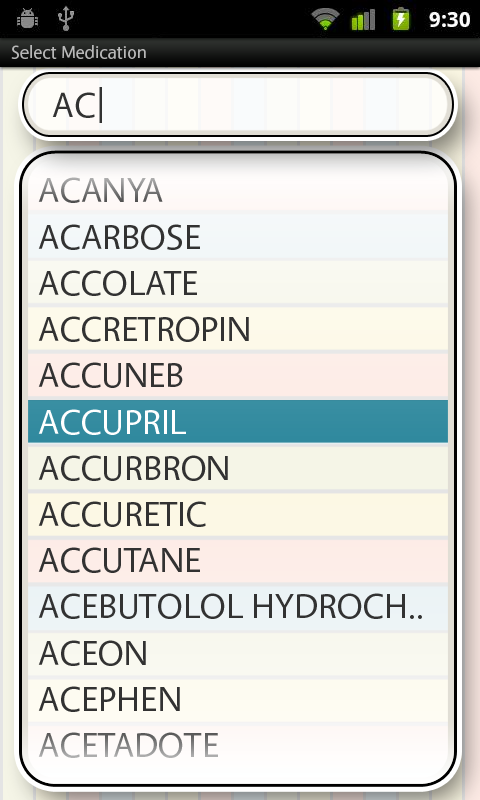
<style>
.page{position:relative;width:480px;height:800px}
.page>*{position:absolute;margin:0}
.t1{font:17.9px "Vegur-Regular";color:#b9b9b9}
.t2{font:35.9px "Vegur-Regular";color:#323232}
.t3{font:35.3px/46.2px "Vegur-Regular";color:#323232}
.t4{font:35.3px/46.2px "Vegur-Regular";color:#ffffff}
</style>
<div class="page">
<p class="t1" style="left:11px;top:45px;width:135px;height:14px">Select Medication</p>
<p class="t2" style="left:99px;top:87px;width:3px;height:36px">|</p>
<p class="t2" style="left:52px;top:92px;width:43px;height:26px">AC</p>
<p class="t3" style="left:38px;top:177px;width:384px;height:581px">ACANYA<br>ACARBOSE<br>ACCOLATE<br>ACCRETROPIN<br>ACCUNEB<br><span class="t4">ACCUPRIL<br></span>ACCURBRON<br>ACCURETIC<br>ACCUTANE<br>ACEBUTOLOL HYDROCH..<br>ACEON<br>ACEPHEN<br>ACETADOTE</p>
</div>
